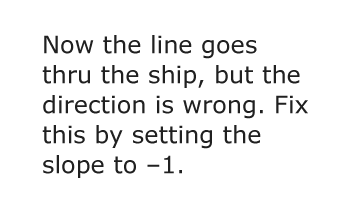
<style>
.page{position:relative;width:340px;height:222px;background:#ffffff}
.page>*{position:absolute;margin:0}
.t1{font:24px/30px "Verdana";color:#202020}
</style>
<div class="page">
<p class="t1" style="left:42px;top:35px;width:266px;height:143px">Now the line goes thru the ship, but the direction is wrong. Fix this by setting the slope to –1.</p>
</div>
